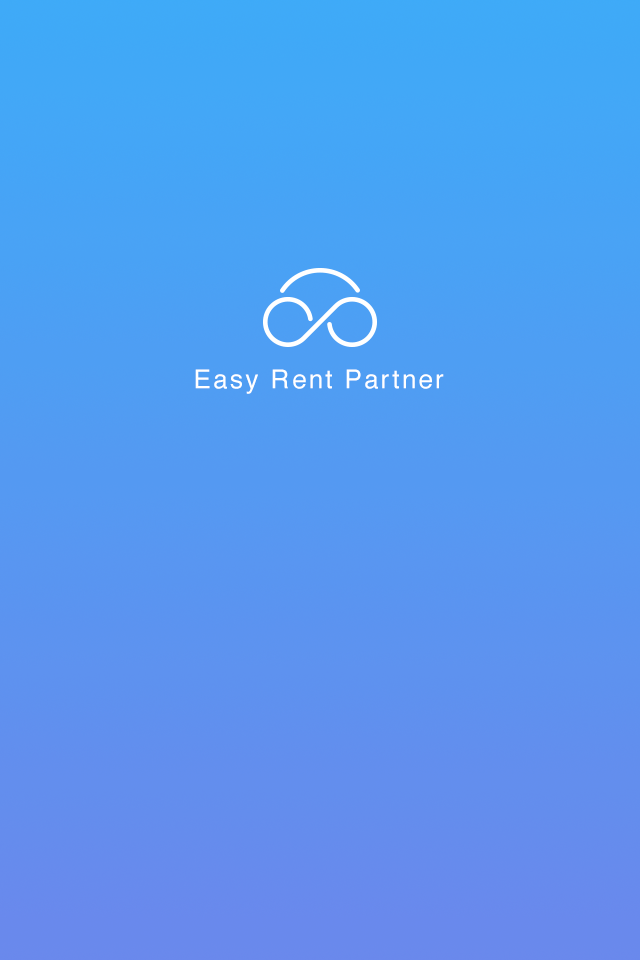
<style>
.page{position:relative;width:640px;height:960px}
.page>*{position:absolute;margin:0}
.t1{font:26px "Helvetica";letter-spacing:0.1em;color:#ffffff}
</style>
<div class="page">
<p class="t1" style="left:195px;top:369px;width:249px;height:25px">Easy Rent Partner</p>
</div>
